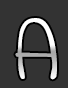
<style>
.page{position:relative;width:68px;height:88px;background:#333333}
.page>*{position:absolute;margin:0}
.t1{font:80px "IndieFlower-Regular"}
</style>
<div class="page">
<p class="t1" style="left:15px;top:18px;width:42px;height:62px">A</p>
</div>
